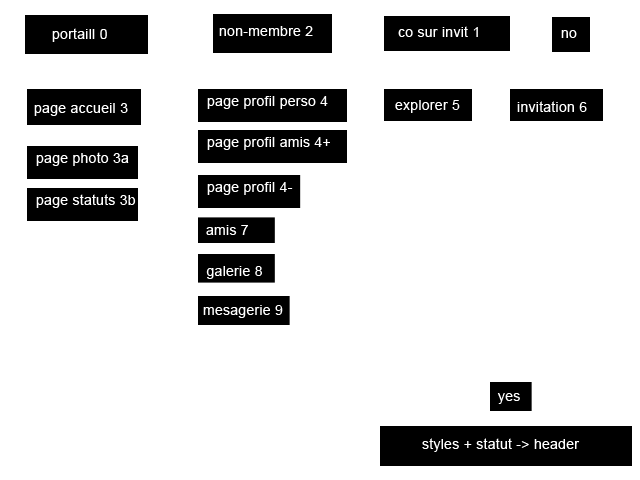
<style>
.page{position:relative;width:640px;height:480px;background:#ffffff}
.page>*{position:absolute;margin:0}
.t1{font:14px "ArialMT";letter-spacing:0.02em;color:#ffffff}
</style>
<div class="page">
<p class="t1" style="left:52px;top:28px;width:55px;height:14px">portaill 0</p>
<p class="t1" style="left:219px;top:26px;width:94px;height:10px">non-membre 2</p>
<p class="t1" style="left:398px;top:26px;width:80px;height:11px">co sur invit 1</p>
<p class="t1" style="left:561px;top:30px;width:16px;height:8px">no</p>
<p class="t1" style="left:207px;top:96px;width:121px;height:13px">page profil perso 4</p>
<p class="t1" style="left:395px;top:100px;width:65px;height:13px">explorer 5</p>
<p class="t1" style="left:517px;top:101px;width:70px;height:11px">invitation 6</p>
<p class="t1" style="left:34px;top:103px;width:94px;height:13px">page accueil 3</p>
<p class="t1" style="left:207px;top:137px;width:123px;height:13px">page profil amis 4+</p>
<p class="t1" style="left:36px;top:152px;width:93px;height:14px">page photo 3a</p>
<p class="t1" style="left:207px;top:182px;width:86px;height:13px">page profil 4-</p>
<p class="t1" style="left:36px;top:194px;width:100px;height:14px">page statuts 3b</p>
<p class="t1" style="left:206px;top:225px;width:42px;height:10px">amis 7</p>
<p class="t1" style="left:206px;top:266px;width:56px;height:13px">galerie 8</p>
<p class="t1" style="left:203px;top:305px;width:80px;height:13px">mesagerie 9</p>
<p class="t1" style="left:497px;top:393px;width:23px;height:11px">yes</p>
<p class="t1" style="left:422px;top:438px;width:158px;height:14px">styles + statut -&gt; header</p>
</div>
